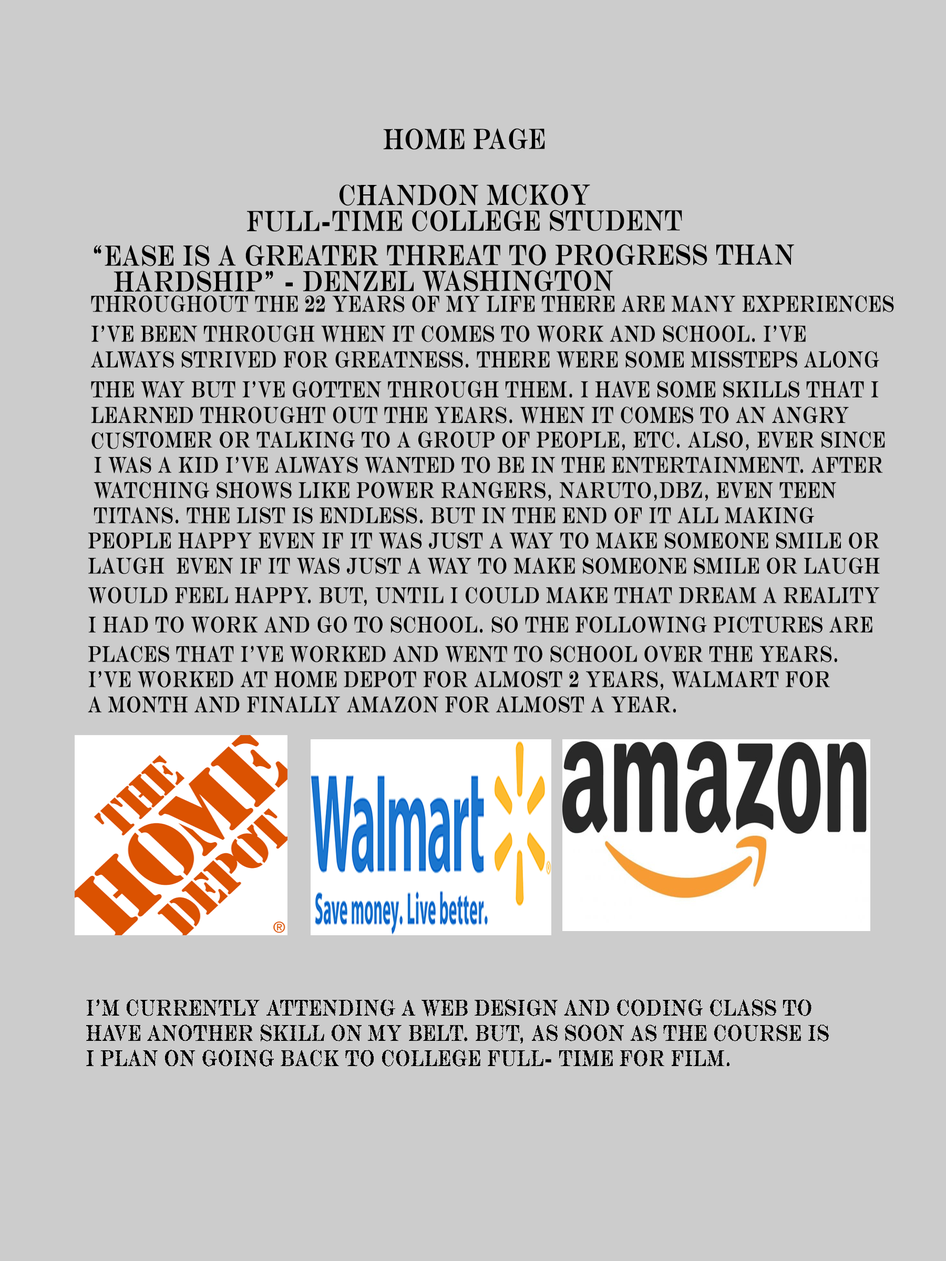
<style>
.page{position:relative;width:946px;height:1261px;background:#cccccc}
.page>*{position:absolute;margin:0}
.t1{font:29px/4.3px "EngraversMT";letter-spacing:0.01em;color:#000000;font-weight:bold;scale:0.7 1}
.t2{font:23.1px/4.3px "EngraversMT";letter-spacing:0.01em;color:#000000;font-weight:bold;scale:0.68 1}
.t3{font:22.7px/4.2px "EngraversMT";letter-spacing:0.01em;color:#000000;font-weight:bold;scale:0.69 1}
</style>
<div class="page">
<p class="t1" style="left:94px;top:128px;width:700px;height:164px;text-align:center">home page<br><br><br><br><br><br><br><br><br><br><br><br><br>chandon mckoy<br><br><br><br><br><br>full-time college student<br><br><br><br><br><br><br><br>     “ease is a greater threat to progress than <br><br><br><br><br><br>        hardship” - denzel washington</p>
<p class="t2" style="left:91px;top:295px;width:803px;height:154px">throughout the 22 years of my life there are many experiences<br><br><br> <br><br><br><br>   i’ve been through when it comes to work and school. i’ve <br><br><br><br><br><br>   always strived for greatness. there were some missteps along<br><br><br><br><br><br><br>   the way but i’ve gotten through them. i have some skills that i<br><br><br><br>   <br>   <br>   learned throught out the years. when it comes to an angry <br><br><br><br><br>   <br>   cu</p>
<p class="t3" style="left:88px;top:431px;width:797px;height:282px">stomer or talking to a group of people, etc. Also, ever since<br><br><br><br><br><br>  i was a kid i’ve always wanted to be in the entertainment. after <br><br><br> <br>  <br>  <br>  watching shows like power rangers, naruto,dbz, even teen <br><br><br><br><br>  <br>  titans. the list is endless. but in the end of it all making <br><br><br><br> <br>   <br> people happy even if it was just a way to make someone smile or <br><br> <br><br> <br>   <br> laugh  even if it was just a way to make someone smile or laugh  <br><br><br><br> <br> <br>    <br> would feel happy. But, until i could make that dream a reality <br><br><br> <br><br> <br>   <br> i had to work and go to school. so the following pictures are <br><br><br><br><br><br>   <br> places that i’ve worked and went to school over the years. <br><br><br><br>  <br>   <br> i’ve worked at home depot for almost 2 years, walmart for <br><br><br><br>   <br><br> a month and finally amazon for almost a year.</p>
<p class="t3" style="left:86px;top:999px;width:743px;height:68px">i’m currently attending a web design and coding class to <br><br><br><br><br>   <br>  have another skill on my belt. but, as soon as the course is<br>                                       <br>    <br><br><br><br>  i plan on going back to college full- time for film.</p>
</div>
